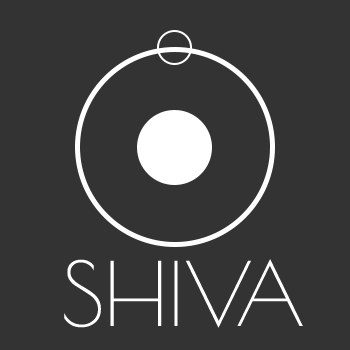
<style>
.page{position:relative;width:350px;height:350px;background:#333333}
.page>*{position:absolute;margin:0}
.t1{font:86.8px "PoiretOne-Regular";color:#ffffff}
</style>
<div class="page">
<p class="t1" style="left:64px;top:259px;width:239px;height:69px">SHIVA</p>
</div>
